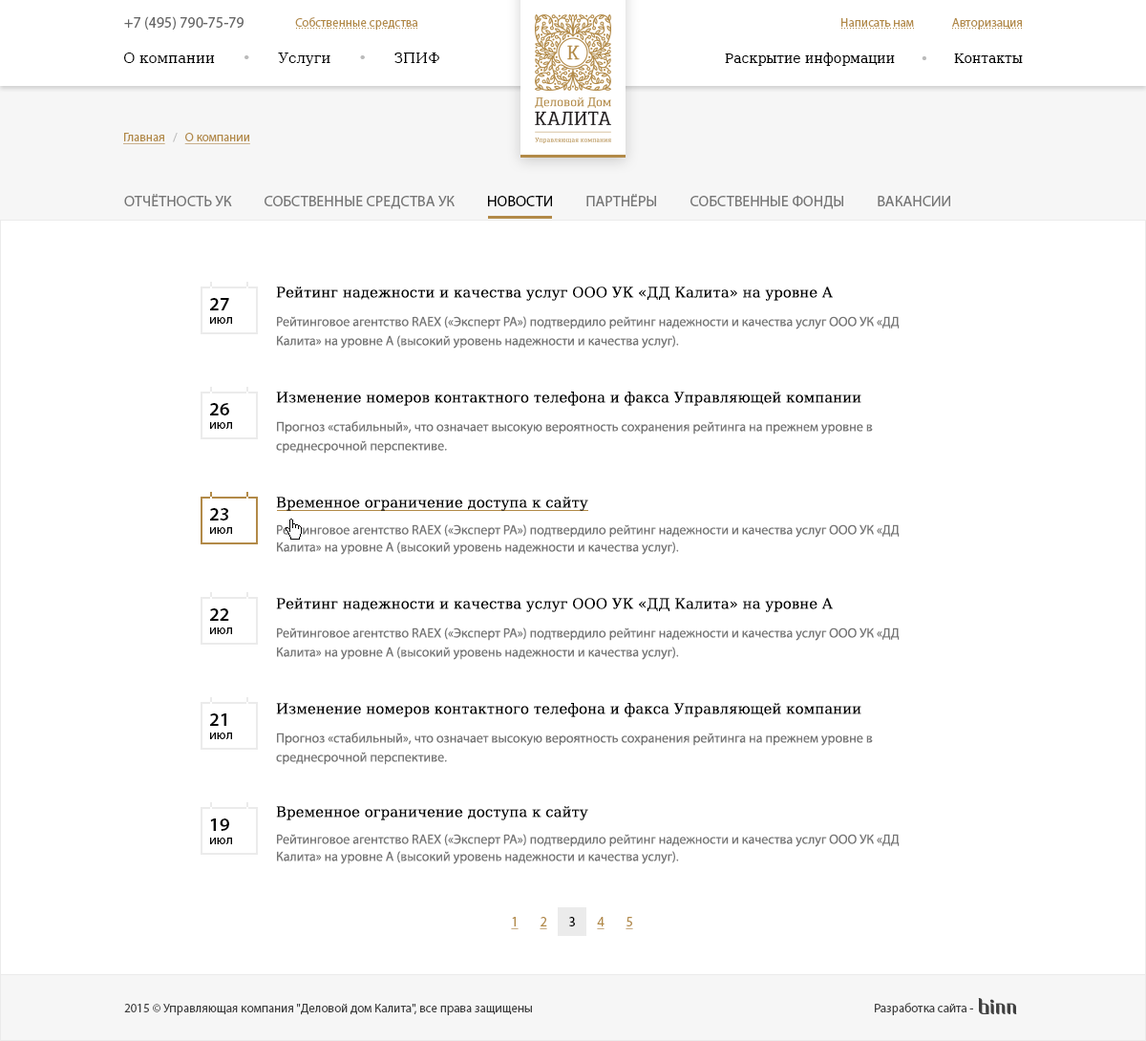
<style>
.page{position:relative;width:1146px;height:1041px;background:#ffffff}
.page>*{position:absolute;margin:0}
.t1{font:15.3px "MyriadPro-Regular";color:#666666}
.t2{font:12.4px "MyriadPro-Regular";color:#b28a48}
.t3{font:9.5px "ArialMT";color:#b28a48}
.t4{font:14.3px "DejaVuSerif";color:#000000}
.t5{font:14.3px "DejaVuSerif";color:#bbbbbb}
.t6{font:13.4px "DejaVuSerif";color:#000000}
.t7{font:13.4px "DejaVuSerif";color:#bbbbbb}
.t8{font:12.4px "MyriadPro-Regular";color:#b28a48;text-decoration:underline}
.t9{font:12.4px "MyriadPro-Regular";color:#bbbbbb}
.t10{font:15.3px "MyriadPro-Regular";color:#767676;text-transform:uppercase}
.t11{font:15.3px "MyriadPro-Regular";color:#000000;text-transform:uppercase}
.t12{font:13.4px/9.5px "MyriadPro-Regular";color:#767676}
.t13{font:14.3px/19.1px "DejaVuSerif";color:#000000}
.t14{font:13.4px/19.1px "MyriadPro-Regular";color:#767676}
.t15{font:13.4px/17.2px "MyriadPro-Regular";color:#767676}
.t16{font:14.3px/17.2px "DejaVuSerif";color:#000000}
.t17{font:13.4px/13.4px "MyriadPro-Regular";color:#000000}
.t18{font:19.1px/13.4px "MyriadPro-Semibold";color:#000000}
.t19{font:13.4px "MyriadPro-Regular";color:#b28a48;text-decoration:underline}
.t20{font:13.4px "MyriadPro-Regular";color:#000000}
.t21{font:12.4px "MyriadPro-Regular";color:#404040}
</style>
<div class="page">
<p class="t1" style="left:124px;top:16px;width:119px;height:14px">+7 (495) 790-75-79</p>
<p class="t2" style="left:295px;top:17px;width:122px;height:13px">Собственные средства</p>
<p class="t3" style="left:296px;top:28px;width:121px;height:1px">...........................................</p>
<p class="t2" style="left:841px;top:18px;width:73px;height:9px">Написать нам</p>
<p class="t3" style="left:841px;top:28px;width:73px;height:1px">..........................</p>
<p class="t2" style="left:952px;top:18px;width:70px;height:12px">Авторизация</p>
<p class="t3" style="left:952px;top:28px;width:70px;height:1px">.........................</p>
<p class="t4" style="left:123px;top:53px;width:316px;height:13px">О компании      <span class="t5">•      </span>Услуги      <span class="t5">•      </span>ЗПИФ</p>
<p class="t6" style="left:725px;top:53px;width:298px;height:13px">Раскрытие информации      <span class="t7">•      </span>Контакты</p>
<p class="t8" style="left:123px;top:133px;width:127px;height:11px">Главная<span class="t9">   /   </span>О компании</p>
<p class="t10" style="left:124px;top:194px;width:826px;height:15px">Отчётность УК          Собственные средства УК          <span class="t11">Новости</span>          Партнёры          Собственные фонды          Вакансии</p>
<p class="t12" style="left:276px;top:286px;width:623px;height:578px"><span class="t13">Рейтинг надежности и качества услуг ООО УК «ДД Калита» на уровне A<br><br></span>Рейтинговое агентство RAEX («Эксперт РА») подтвердило рейтинг надежности и качества услуг ООО УК «ДД <span class="t14">Калита» на уровне А (высокий уровень надежности и качества услуг). <br><br><br></span><span class="t13">Изменение номеров контактного телефона и факса Управляющей компании<br><br></span>Прогноз «стабильный», что означает высокую вероятность сохранения рейтинга на прежнем уровне в <span class="t14">среднесрочной перспективе.<br><br><br></span><span class="t13">Временное ограничение доступа к сайту<br><br></span>Рейтинговое агентство RAEX («Эксперт РА») подтвердило рейтинг надежности и качества услуг ООО УК «ДД <span class="t15">Калита» на уровне А (высокий уровень надежности и качества услуг).<br></span><span class="t13"><br><br>Рейтинг надежности и качества услуг ООО УК «ДД Калита» на уровне A<br><br></span>Рейтинговое агентство RAEX («Эксперт РА») подтвердило рейтинг надежности и качества услуг ООО УК «ДД <span class="t14">Калита» на уровне А (высокий уровень надежности и качества услуг).<br><br><br></span><span class="t13">Изменение номеров контактного телефона и факса Управляющей компании<br><br></span>Прогноз «стабильный», что означает высокую вероятность сохранения рейтинга на прежнем уровне в <span class="t14">среднесрочной перспективе.<br><br><br></span><span class="t16">Временное ограничение доступа к сайту<br><br></span>Рейтинговое агентство RAEX («Эксперт РА») подтвердило рейтинг надежности и качества услуг ООО УК «ДД <span class="t15">Калита» на уровне А (высокий уровень надежности и качества услуг).</span></p>
<p class="t17" style="left:210px;top:298px;width:22px;height:26px"><span class="t18">27<br></span>июл</p>
<p class="t17" style="left:210px;top:403px;width:22px;height:26px"><span class="t18">26<br></span>июл</p>
<p class="t17" style="left:210px;top:508px;width:22px;height:26px"><span class="t18">23<br></span>июл</p>
<p class="t17" style="left:210px;top:608px;width:22px;height:26px"><span class="t18">22<br></span>июл</p>
<p class="t17" style="left:210px;top:713px;width:22px;height:26px"><span class="t18">21<br></span>июл</p>
<p class="t17" style="left:210px;top:818px;width:22px;height:26px"><span class="t18">19<br></span>июл</p>
<p class="t19" style="left:511px;top:917px;width:7px;height:12px">1</p>
<p class="t19" style="left:539px;top:917px;width:8px;height:12px">2</p>
<p class="t20" style="left:569px;top:917px;width:6px;height:9px">3</p>
<p class="t19" style="left:597px;top:917px;width:7px;height:12px">4</p>
<p class="t19" style="left:625px;top:917px;width:8px;height:12px">5</p>
<p class="t21" style="left:124px;top:1003px;width:408px;height:12px">2015 © Управляющая компания "Деловой дом Калита", все права защищены</p>
<p class="t21" style="left:875px;top:1003px;width:98px;height:12px">Разработка сайта -</p>
</div>
